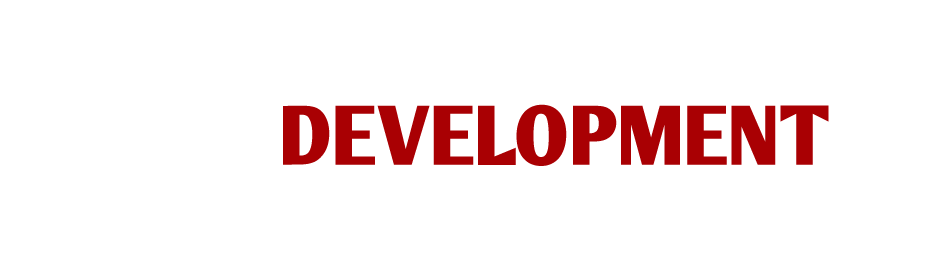
<style>
.page{position:relative;width:940px;height:268px;background:#ffffff}
.page>*{position:absolute;margin:0}
.t1{font:82.7px "ArmWrestler-Bold";color:#a90003}
.t2{font:82.7px "ArmWrestler-Bold";color:#ffffff}
</style>
<div class="page">
<p class="t1" style="left:113px;top:104px;width:716px;height:62px"><span class="t2">WEB</span>DEVELOPMENT</p>
</div>
